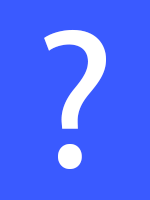
<style>
.page{position:relative;width:150px;height:200px;background:#3a5aff}
.page>*{position:absolute;margin:0}
.t1{font:200px "MyriadPro-Regular";color:#ffffff}
</style>
<div class="page">
<p class="t1" style="left:44px;top:29px;width:62px;height:140px">?</p>
</div>
